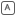
<style>
.page{position:relative;width:16px;height:16px;background:#ffffff}
.page>*{position:absolute;margin:0}
.t1{font:8px "ArialMT";color:#676767;font-weight:bold}
</style>
<div class="page">
<p class="t1" style="left:4px;top:4px;width:7px;height:7px">A</p>
</div>
